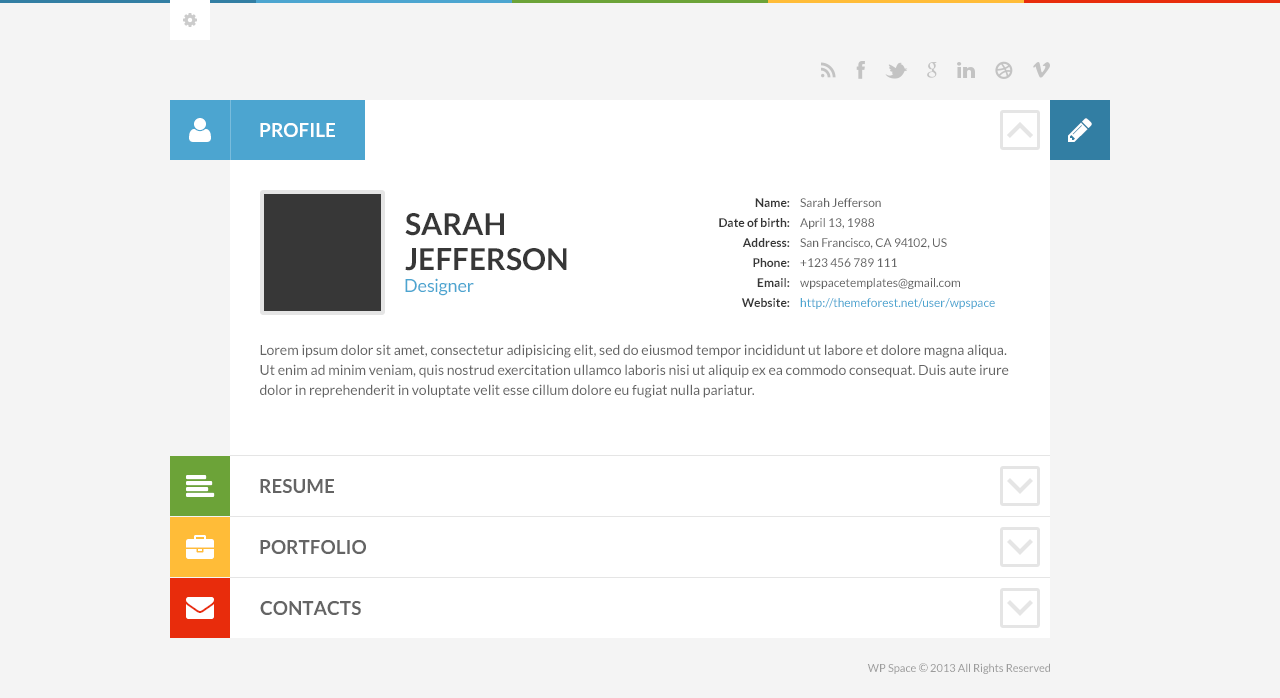
<style>
.page{position:relative;width:1280px;height:698px;background:#f4f4f4}
.page>*{position:absolute;margin:0}
.t1{font:19px "Lato-Bold";color:#ffffff;text-transform:uppercase}
.t2{font:12px/20px "Lato-Bold";color:#373737}
.t3{font:12px/20px "Lato-Regular";color:#646464}
.t4{font:12px/20px "Lato-Regular";color:#4ca5d0}
.t5{font:30px/35px "Lato-Bold";color:#373737;text-transform:uppercase}
.t6{font:18px "Lato-Regular";color:#4ca5d0}
.t7{font:14px/20px "Lato-Regular";color:#646464}
.t8{font:19px "Lato-Bold";color:#646464;text-transform:uppercase}
.t9{font:11px "Lato-Regular";color:#9b9b9b}
.t10{font:12px "Lato-Regular";color:#9b9b9b}
</style>
<div class="page">
<p class="t1" style="left:260px;top:123px;width:75px;height:14px">Profile</p>
<p class="t2" style="left:719px;top:198px;width:71px;height:109px;text-align:right">Name:<br>Date of birth:<br>Address:<br>Phone:<br>Email:<br>Website:</p>
<p class="t3" style="left:800px;top:198px;width:195px;height:111px">Sarah Jefferson<br>April 13, 1988<br>San Francisco, CA 94102, US<br>+123 456 789 111<br>wpspacetemplates@gmail.com<br><span class="t4">http://themeforest.net/user/wpspace</span></p>
<p class="t5" style="left:405px;top:213px;width:162px;height:58px">Sarah<br>Jefferson</p>
<p class="t6" style="left:405px;top:278px;width:69px;height:18px">Designer</p>
<p class="t7" style="left:260px;top:344px;width:749px;height:54px">Lorem ipsum dolor sit amet, consectetur adipisicing elit, sed do eiusmod tempor incididunt ut labore et dolore magna aliqua. Ut enim ad minim veniam, quis nostrud exercitation ullamco laboris nisi ut aliquip ex ea commodo consequat. Duis aute irure dolor in reprehenderit in voluptate velit esse cillum dolore eu fugiat nulla pariatur. <br>Excepteur sint occaecat cupidatat non proident, sunt in culpa qui officia deserunt mollit anim id est laborum.</p>
<p class="t8" style="left:260px;top:479px;width:74px;height:14px">Resume</p>
<p class="t8" style="left:260px;top:540px;width:106px;height:14px">Portfolio</p>
<p class="t8" style="left:260px;top:601px;width:101px;height:14px">ContactS</p>
<p class="t9" style="left:867px;top:663px;width:183px;height:11px">WP Space <span class="t10">©</span> 2013 All Rights Reserved</p>
</div>
